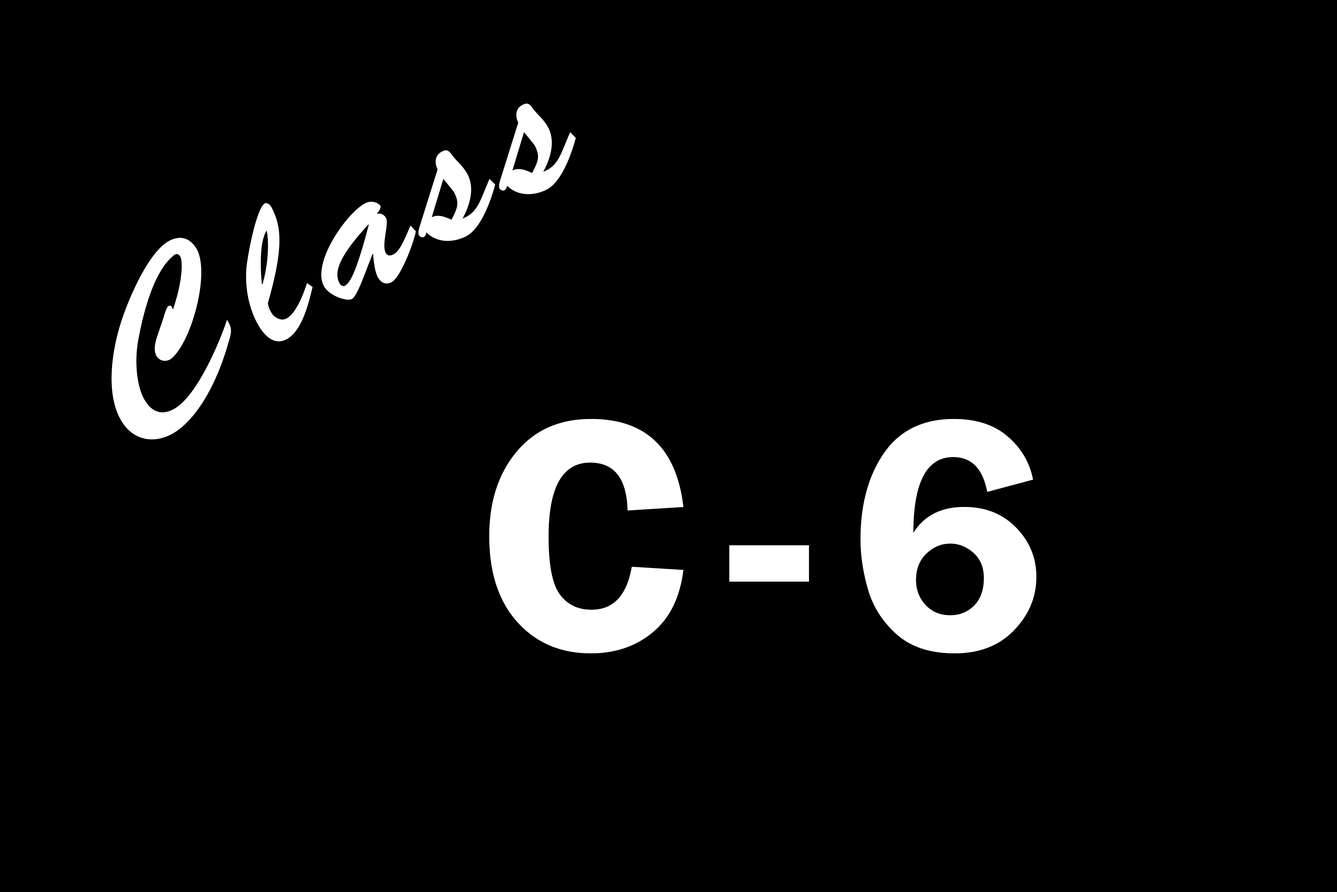
<style>
.page{position:relative;width:1337px;height:892px;background:#000000}
.page>*{position:absolute;margin:0}
.t1{font:203.7px "BrushScriptStd";letter-spacing:0.1em;color:#ffffff}
.t2{font:341.1px "FranklinGothic-Demi";letter-spacing:0.1em;color:#ffffff}
</style>
<div class="page">
<p class="t1" style="left:111px;top:103px;width:465px;height:336px;rotate:-30deg">Class</p>
<p class="t2" style="left:489px;top:419px;width:548px;height:234px">C-6</p>
</div>
